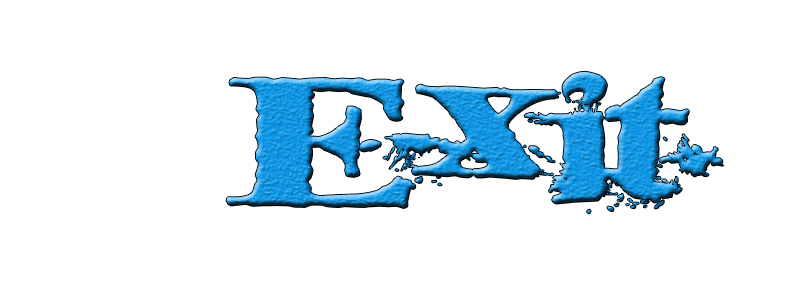
<style>
.page{position:relative;width:800px;height:300px;background:#ffffff}
.page>*{position:absolute;margin:0}
.t1{font:252.5px "InkSpecial";scale:1.32 1}
</style>
<div class="page">
<p class="t1" style="left:226px;top:71px;width:498px;height:143px">Exit</p>
</div>
